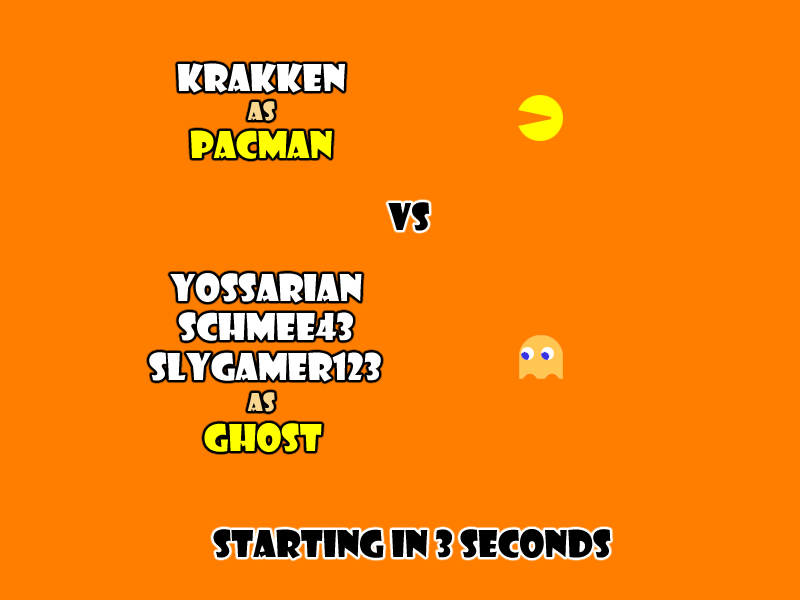
<style>
.page{position:relative;width:800px;height:600px;background:#ff7e00}
.page>*{position:absolute;margin:0}
.t1{font:36px "ShowcardGothic-Reg";color:#ffffff}
.t2{font:24px "ShowcardGothic-Reg";color:#f9d791}
.t3{font:36px "ShowcardGothic-Reg";color:#ffff00}
.t4{font:36px "ShowcardGothic-Reg";color:#000000}
</style>
<div class="page">
<p class="t1" style="left:177px;top:63px;width:168px;height:30px">Krakken</p>
<p class="t2" style="left:247px;top:101px;width:28px;height:20px">as</p>
<p class="t3" style="left:190px;top:130px;width:142px;height:29px">PacMan</p>
<p class="t4" style="left:388px;top:202px;width:41px;height:29px">vs</p>
<p class="t1" style="left:170px;top:273px;width:192px;height:30px">Yossarian</p>
<p class="t1" style="left:178px;top:312px;width:175px;height:29px">schmee43</p>
<p class="t1" style="left:149px;top:352px;width:232px;height:30px">SLYGAMER123</p>
<p class="t2" style="left:247px;top:392px;width:28px;height:20px">as</p>
<p class="t3" style="left:204px;top:423px;width:118px;height:29px">GHOST</p>
<p class="t4" style="left:213px;top:529px;width:398px;height:30px">STARTING in 3 SECONDS</p>
</div>
